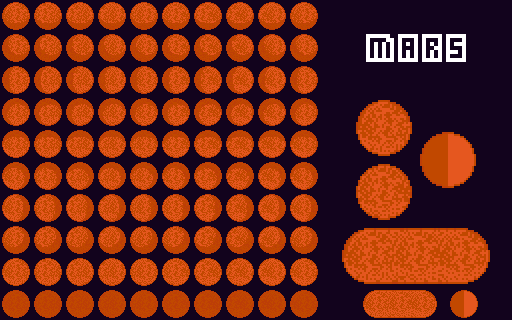
<style>
.page{position:relative;width:512px;height:320px;background:#12031d}
.page>*{position:absolute;margin:0}
.t1{font:32px "KenPixel-Blocks";color:#ffffff}
</style>
<div class="page">
<p class="t1" style="left:366px;top:34px;width:100px;height:28px">Mars</p>
</div>
